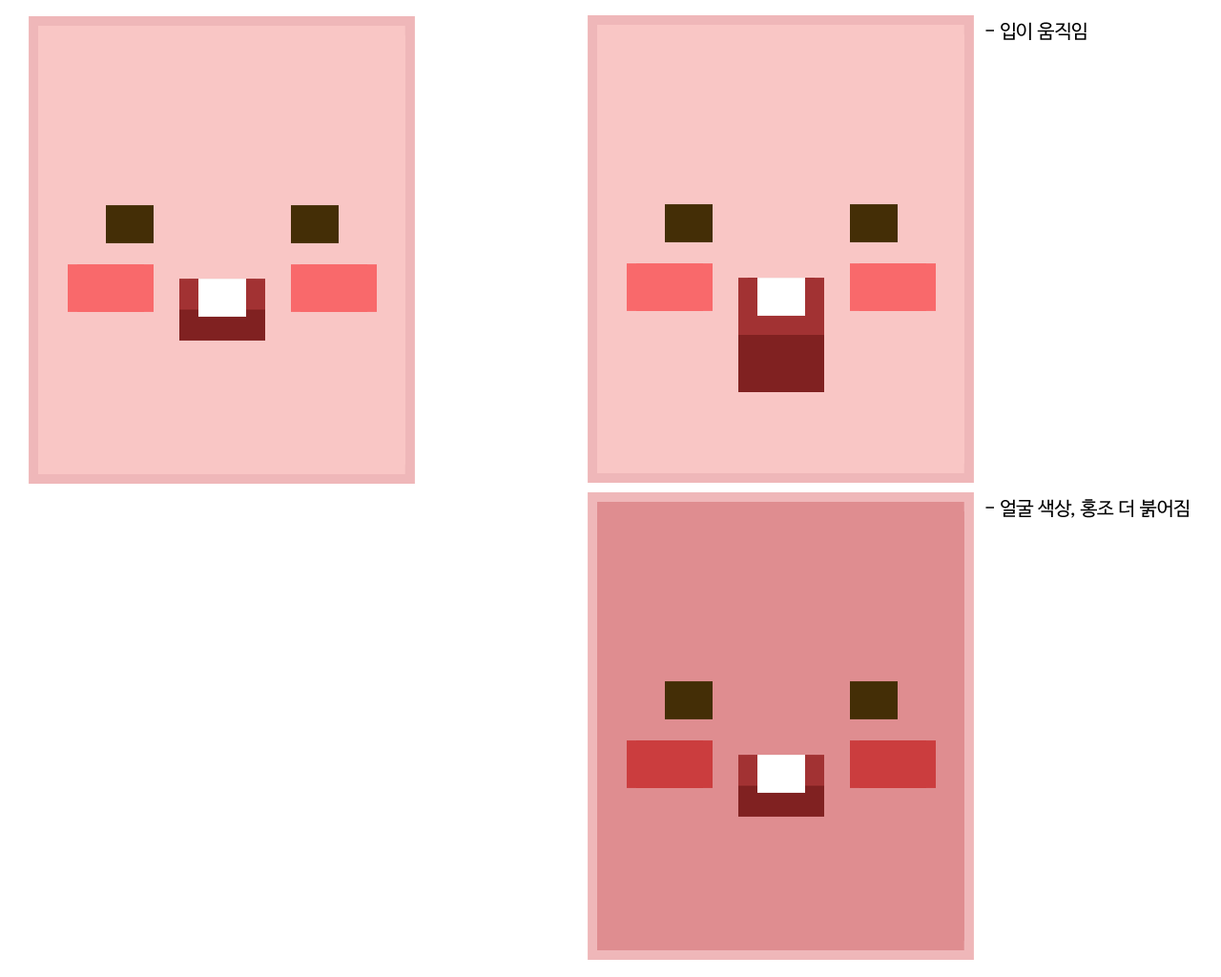
<style>
.page{position:relative;width:1221px;height:977px;background:#ffffff}
.page>*{position:absolute;margin:0}
.t1{font:19.1px "NanumBarunGothic";color:#000000}
</style>
<div class="page">
<p class="t1" style="left:985px;top:22px;width:101px;height:18px">- 입이 움직임</p>
<p class="t1" style="left:985px;top:499px;width:203px;height:19px">- 얼굴 색상, 홍조 더 붉어짐</p>
</div>
